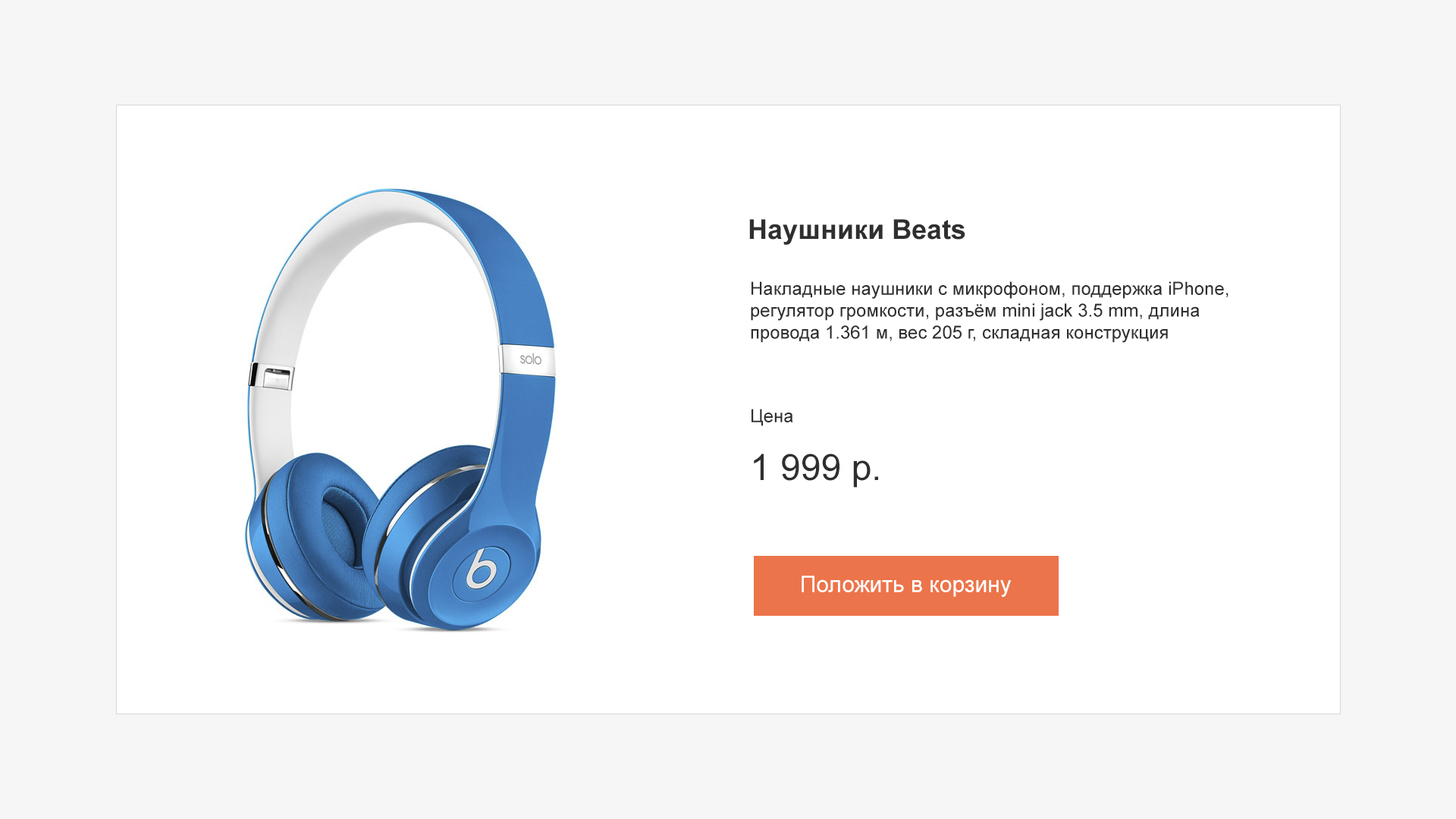
<style>
.page{position:relative;width:1456px;height:819px;background:#ffffff}
.page>*{position:absolute;margin:0}
.t1{font:27.3px "Arial-BoldMT";color:#2f2f2f}
.t2{font:18.2px "ArialMT";color:#2f2f2f}
.t3{font:36.4px "ArialMT";color:#2f2f2f}
.t4{font:22.7px "ArialMT";color:#ffffff}
</style>
<div class="page">
<p class="t1" style="left:749px;top:219px;width:216px;height:26px">Наушники Beats</p>
<p class="t2" style="left:751px;top:281px;width:477px;height:62px">Накладные наушники с микрофоном, поддержка iPhone, регулятор громкости, разъём mini jack 3.5 mm, длина провода 1.361 м, вес 205 г, складная конструкция</p>
<p class="t2" style="left:751px;top:409px;width:42px;height:17px">Цена</p>
<p class="t3" style="left:754px;top:453px;width:124px;height:35px">1 999 р.</p>
<p class="t4" style="left:802px;top:576px;width:209px;height:21px">Положить в корзину</p>
</div>
